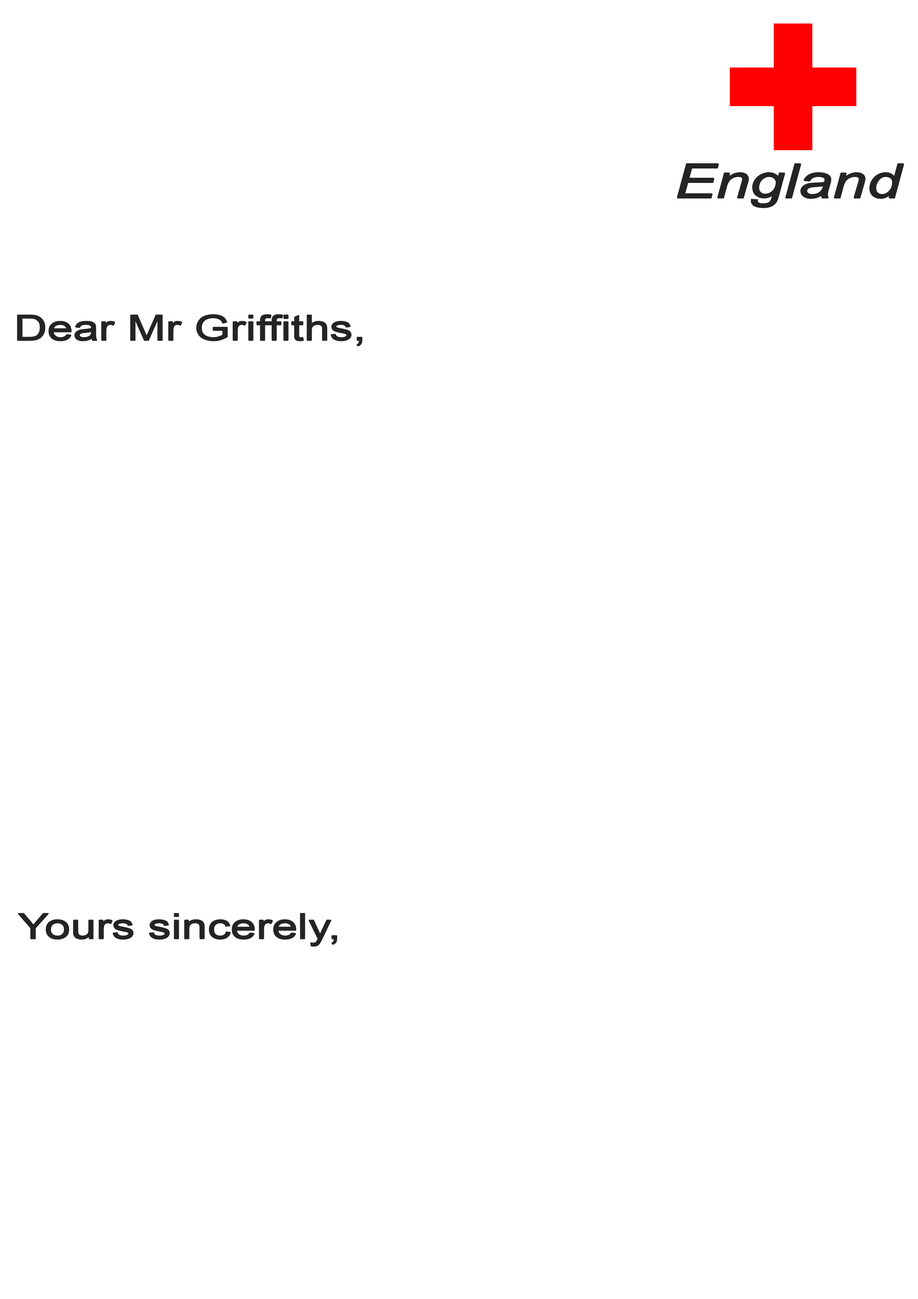
<style>
.page{position:relative;width:918px;height:1299px;background:#ffffff}
.page>*{position:absolute;margin:0}
.t1{font:46.9px "Arial-ItalicMT";letter-spacing:-0.02em;color:#242424;font-weight:bold;scale:1.3 1}
.t2{font:35.2px "ArialMT";letter-spacing:-0.02em;color:#242424;font-weight:bold;scale:1.3 1}
</style>
<div class="page">
<p class="t1" style="left:677px;top:163px;width:227px;height:45px">England</p>
<p class="t2" style="left:17px;top:314px;width:345px;height:33px">Dear Mr Griffiths,</p>
<p class="t2" style="left:18px;top:913px;width:319px;height:34px">Yours sincerely,</p>
</div>
